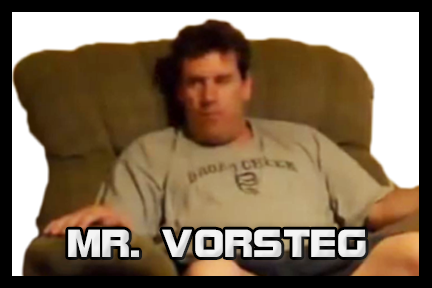
<style>
.page{position:relative;width:432px;height:288px}
.page>*{position:absolute;margin:0}
.t1{font:41.7px "BolsterBold";color:#f3f3f3}
</style>
<div class="page">
<p class="t1" style="left:68px;top:229px;width:298px;height:28px">MR. VORSTEG</p>
</div>
